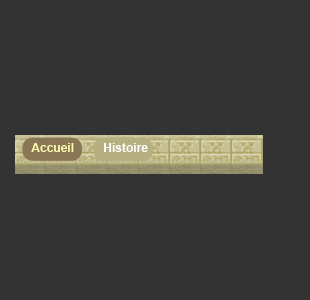
<style>
.page{position:relative;width:310px;height:300px;background:#333333}
.page>*{position:absolute;margin:0}
.t1{font:12px "Arial-BoldMT";color:#ffffff}
.t2{font:12px "Arial-BoldMT";color:#fdf8ad}
</style>
<div class="page">
<p class="t1" style="left:31px;top:143px;width:117px;height:9px"><span class="t2">Accueil</span> Histoire</p>
</div>
